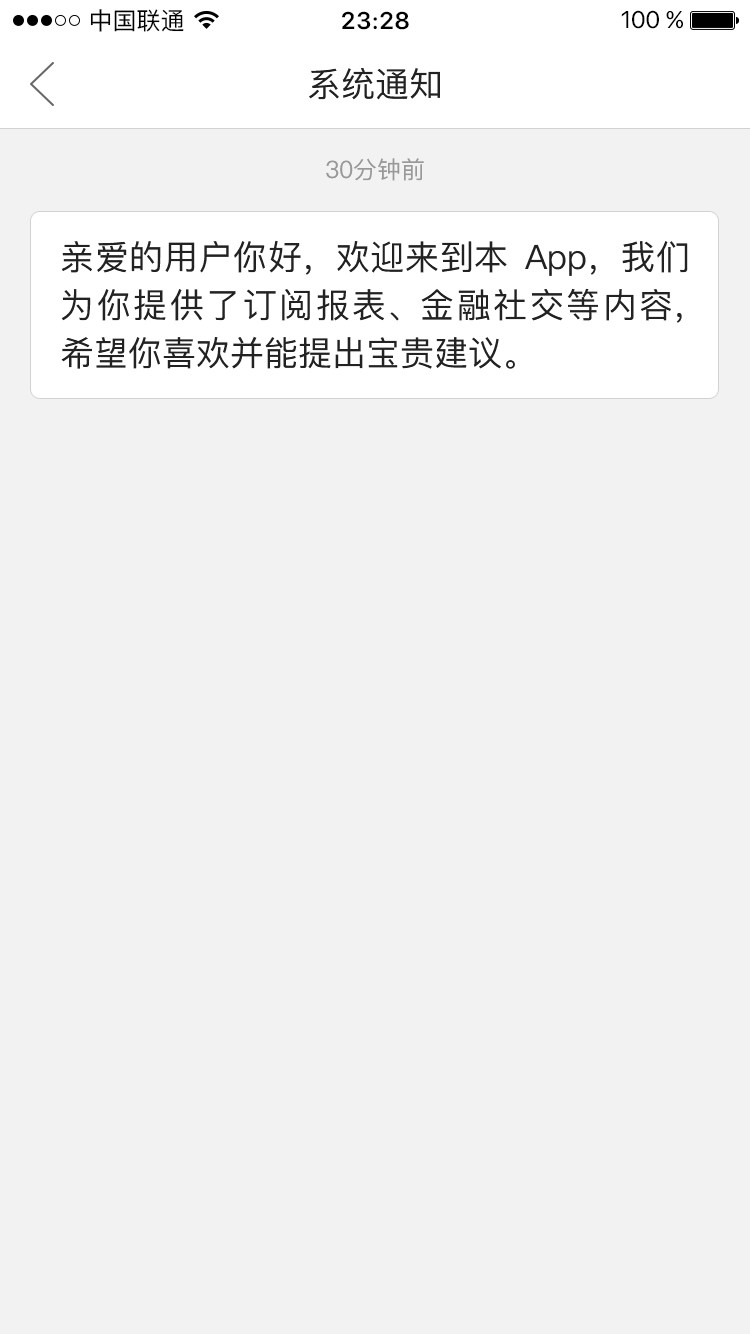
<style>
.page{position:relative;width:750px;height:1334px;background:#f2f2f2}
.page>*{position:absolute;margin:0}
.t1{font:24px "PingFang-SC-Medium";color:#000000}
.t2{font:24px "SFUIDisplay-Semibold";letter-spacing:0.04em;color:#000000}
.t3{font:24px "SFUIDisplay";color:#000000}
.t4{font:34px "PingFang-SC-Medium";color:#222222}
.t5{font:24px "PingFang-SC-Medium";color:#999999}
.t6{font:34px/48px "PingFang-SC-Medium";color:#222222}
</style>
<div class="page">
<p class="t1" style="left:90px;top:9px;width:94px;height:23px">中国联通</p>
<p class="t2" style="left:342px;top:11px;width:67px;height:19px">23:28</p>
<p class="t3" style="left:621px;top:10px;width:62px;height:19px">100 %</p>
<p class="t4" style="left:309px;top:68px;width:131px;height:32px">系统通知</p>
<p class="t5" style="left:326px;top:158px;width:98px;height:23px">30分钟前</p>
<p class="t6" style="left:61px;top:240px;width:627px;height:129px;text-align:justify">亲爱的用户你好，欢迎来到本App，我们为你提供了订阅报表、金融社交等内容，希望你喜欢并能提出宝贵建议。</p>
</div>
